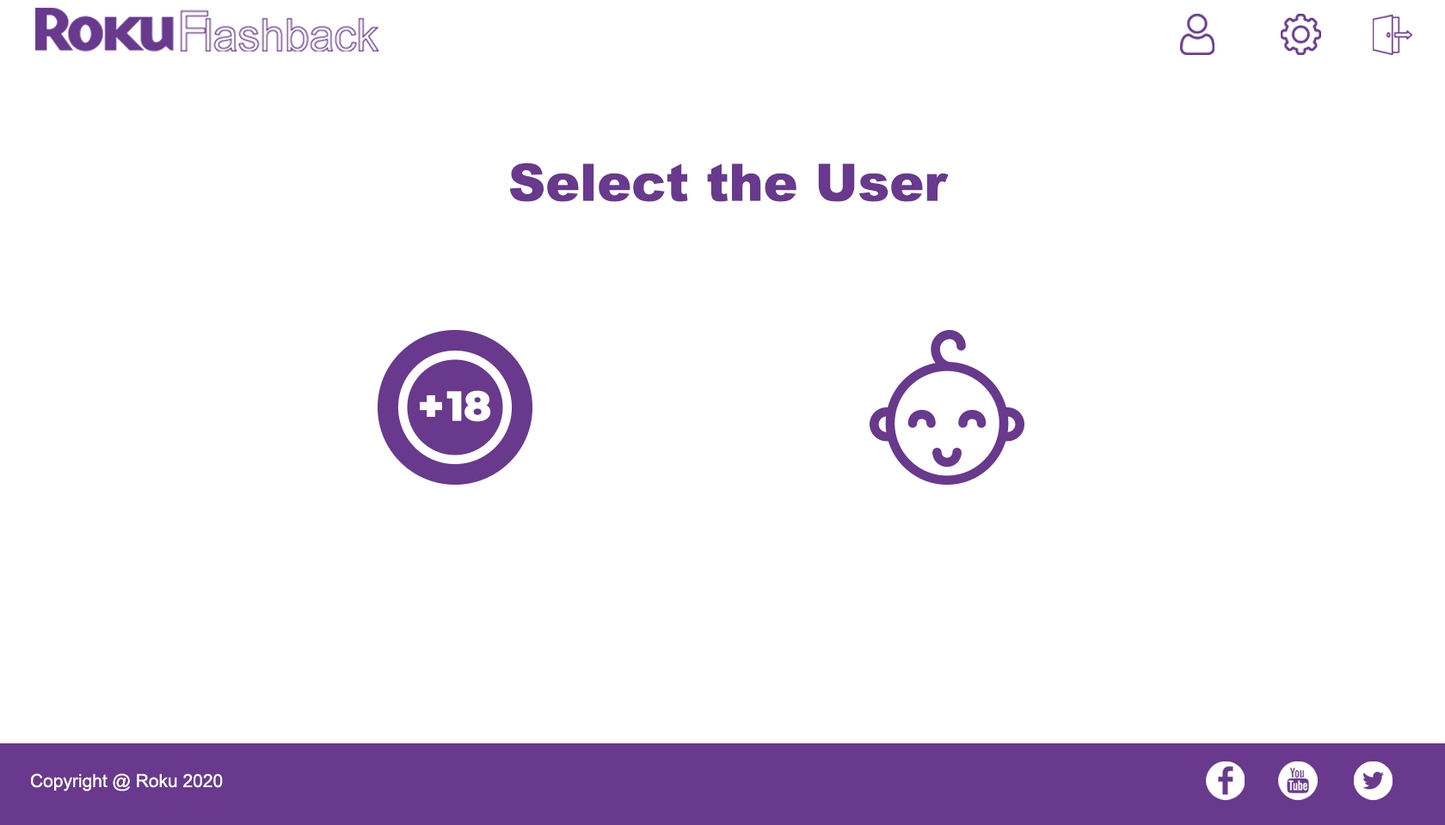
<style>
.page{position:relative;width:1445px;height:825px;background:#ffffff}
.page>*{position:absolute;margin:0}
.t1{font:51.6px "Arial-Black";color:#68398d}
.t2{font:18px "ArialMT";color:#ffffff}
</style>
<div class="page">
<p class="t1" style="left:509px;top:163px;width:439px;height:39px">Select the User</p>
<p class="t2" style="left:31px;top:774px;width:192px;height:18px">Copyright @ Roku 2020</p>
</div>
